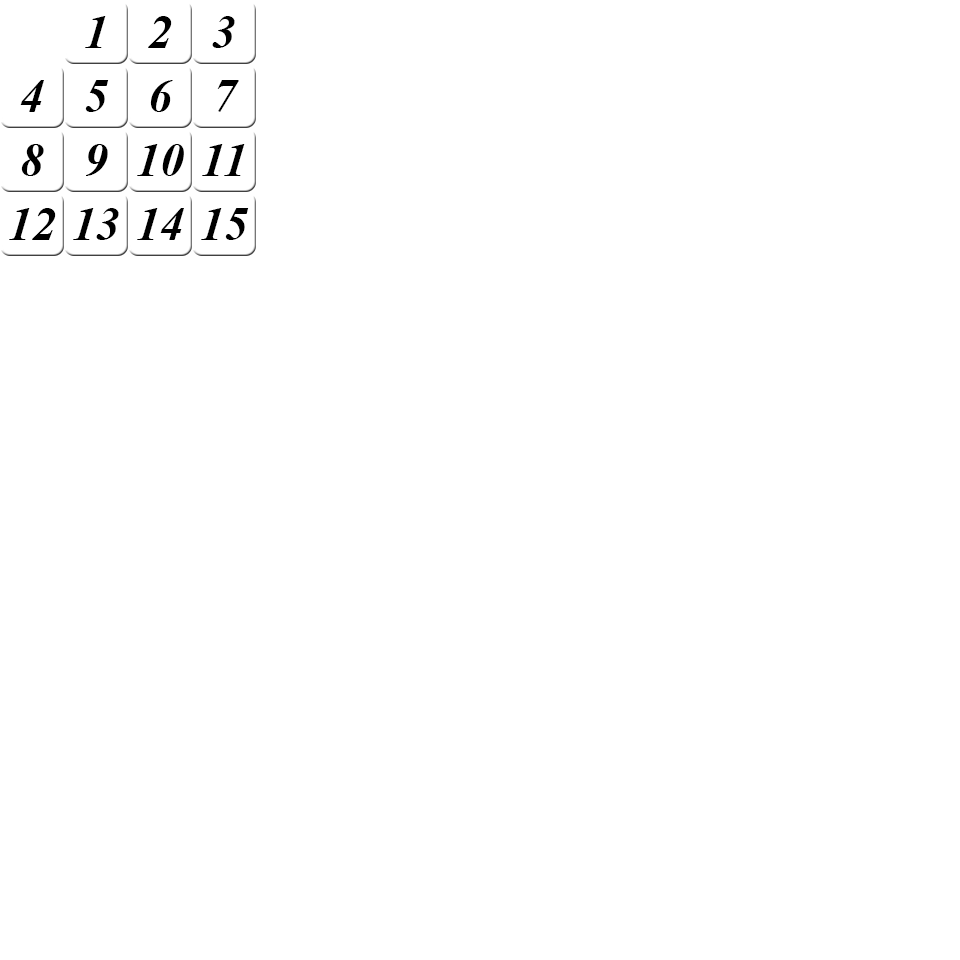
<style>
.page{position:relative;width:960px;height:960px;background:#ffffff}
.page>*{position:absolute;margin:0}
.t1{font:48px "TimesNewRomanPS-BoldItalicMT";color:#000000}
</style>
<div class="page">
<p class="t1" style="left:85px;top:16px;width:21px;height:32px">1</p>
<p class="t1" style="left:148px;top:16px;width:24px;height:32px">2</p>
<p class="t1" style="left:212px;top:16px;width:23px;height:32px">3</p>
<p class="t1" style="left:20px;top:80px;width:24px;height:32px">4</p>
<p class="t1" style="left:85px;top:80px;width:24px;height:32px">5</p>
<p class="t1" style="left:150px;top:80px;width:23px;height:32px">6</p>
<p class="t1" style="left:217px;top:80px;width:22px;height:32px">7</p>
<p class="t1" style="left:21px;top:144px;width:23px;height:32px">8</p>
<p class="t1" style="left:86px;top:144px;width:22px;height:32px">9</p>
<p class="t1" style="left:137px;top:144px;width:47px;height:32px">10</p>
<p class="t1" style="left:202px;top:144px;width:43px;height:32px">11</p>
<p class="t1" style="left:9px;top:208px;width:47px;height:32px">12</p>
<p class="t1" style="left:73px;top:208px;width:46px;height:32px">13</p>
<p class="t1" style="left:137px;top:208px;width:47px;height:32px">14</p>
<p class="t1" style="left:201px;top:208px;width:48px;height:32px">15</p>
</div>
